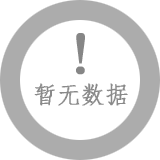
<style>
.page{position:relative;width:160px;height:160px;background:#ffffff}
.page>*{position:absolute;margin:0}
.t1{font:60px "BaskOldFace";color:#868686;font-weight:bold}
.t2{font:24px "·ÂËÎ-Regular";color:#8a8a8a;font-weight:bold}
</style>
<div class="page">
<p class="t1" style="left:76px;top:33px;width:9px;height:42px">!</p>
<p class="t2" style="left:34px;top:83px;width:94px;height:23px">暂无数据</p>
</div>
